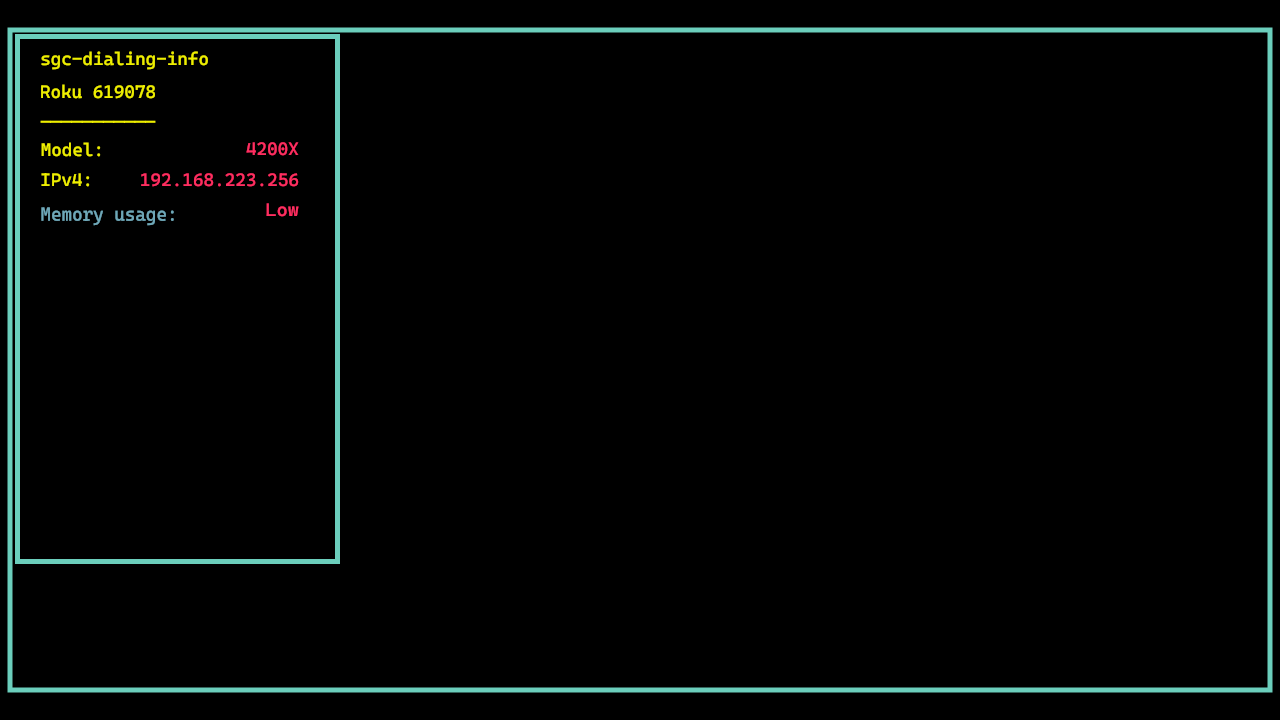
<style>
.page{position:relative;width:1280px;height:720px;background:#000000}
.page>*{position:absolute;margin:0}
.t1{font:18px "CascadiaCode-Roman";color:#eeee00}
.t2{font:18px "CascadiaCode-Roman";color:#ff2e60}
.t3{font:18.9px "CascadiaCode-Roman";color:#6fa8b8;scale:0.95 1}
.t4{font:18px "CascadiaCode-Roman";color:#ff2e60;scale:1.06 1}
</style>
<div class="page">
<p class="t1" style="left:40px;top:51px;width:169px;height:20px">sgc-dialing-info</p>
<p class="t1" style="left:40px;top:84px;width:116px;height:16px">Roku 619078</p>
<p class="t1" style="left:40px;top:120px;width:116px;height:3px">-----------</p>
<p class="t1" style="left:40px;top:142px;width:62px;height:16px">Model:</p>
<p class="t2" style="left:245px;top:142px;width:55px;height:15px">4200X</p>
<p class="t1" style="left:40px;top:173px;width:51px;height:15px">IPv4:</p>
<p class="t2" style="left:140px;top:173px;width:160px;height:15px">192.168.223.256</p>
<p class="t3" style="left:40px;top:207px;width:135px;height:20px">Memory usage:</p>
<p class="t4" style="left:265px;top:203px;width:35px;height:15px">Low</p>
</div>
